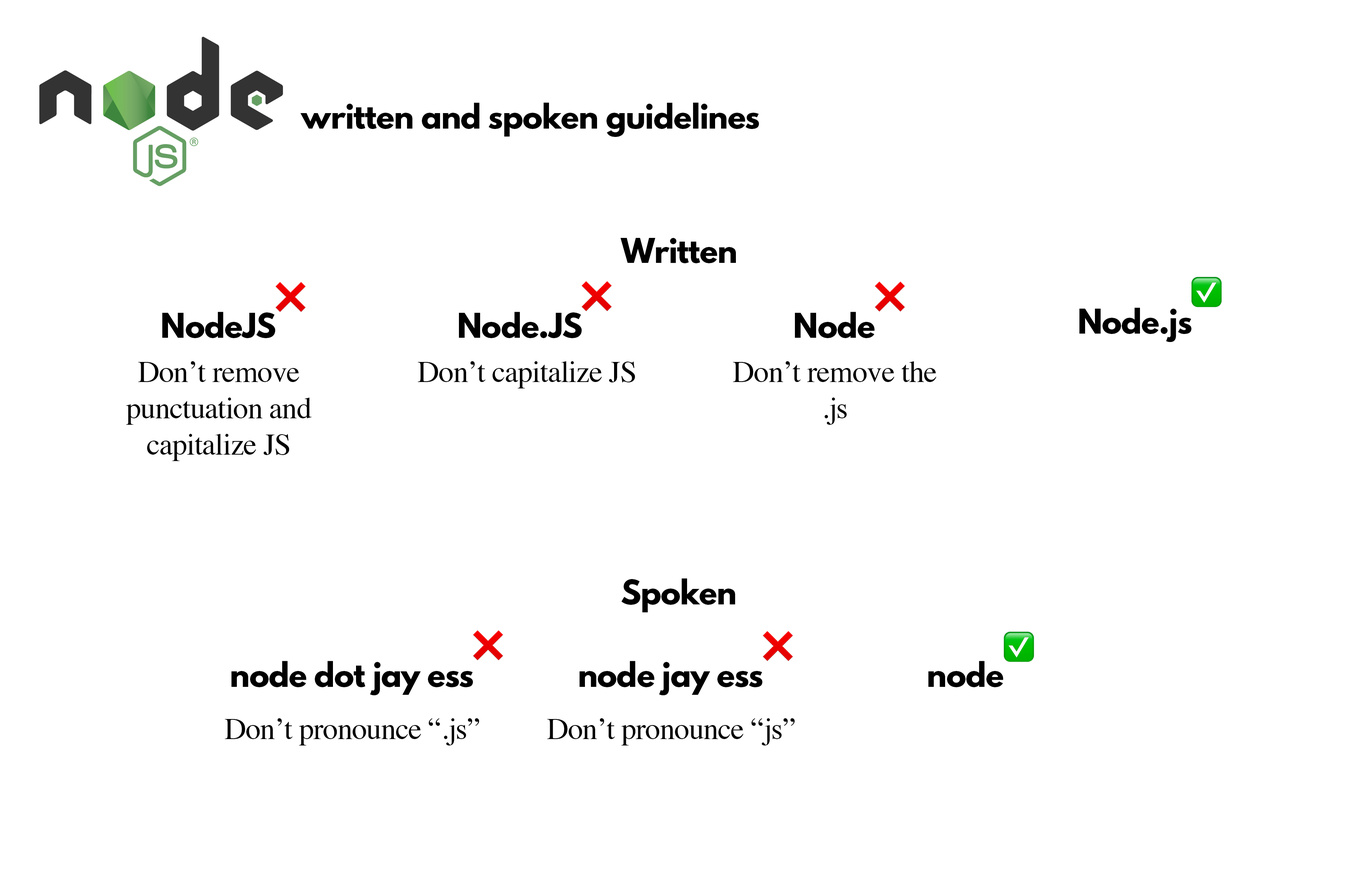
<style>
.page{position:relative;width:1356px;height:879px;background:#ffffff}
.page>*{position:absolute;margin:0}
.t1{font:30.3px "LeagueSpartan-Bold";letter-spacing:-0.02em;color:#000000}
.t2{font:30.3px "Times-Roman";letter-spacing:-0.02em;color:#000000}
</style>
<div class="page">
<p class="t1" style="left:300px;top:103px;width:459px;height:34px">written and spoken guidelines</p>
<p class="t1" style="left:621px;top:238px;width:115px;height:25px">Written</p>
<p class="t1" style="left:162px;top:312px;width:113px;height:26px">NodeJS</p>
<p class="t1" style="left:459px;top:312px;width:123px;height:26px">Node.JS</p>
<p class="t1" style="left:795px;top:312px;width:80px;height:26px">Node</p>
<p class="t1" style="left:1079px;top:308px;width:112px;height:34px">Node.js</p>
<p class="t2" style="left:126px;top:361px;width:186px;height:100px;text-align:center">Don’t remove punctuation and capitalize JS</p>
<p class="t2" style="left:418px;top:361px;width:217px;height:28px">Don’t capitalize JS</p>
<p class="t2" style="left:733px;top:361px;width:203px;height:64px;text-align:center">Don’t remove the .js</p>
<p class="t1" style="left:621px;top:579px;width:114px;height:34px">Spoken</p>
<p class="t1" style="left:231px;top:661px;width:242px;height:35px">node dot jay ess</p>
<p class="t1" style="left:579px;top:661px;width:183px;height:35px">node jay ess</p>
<p class="t1" style="left:928px;top:661px;width:75px;height:26px">node</p>
<p class="t2" style="left:225px;top:719px;width:254px;height:27px">Don’t pronounce “.js”</p>
<p class="t2" style="left:547px;top:719px;width:248px;height:27px">Don’t pronounce “js”</p>
</div>
